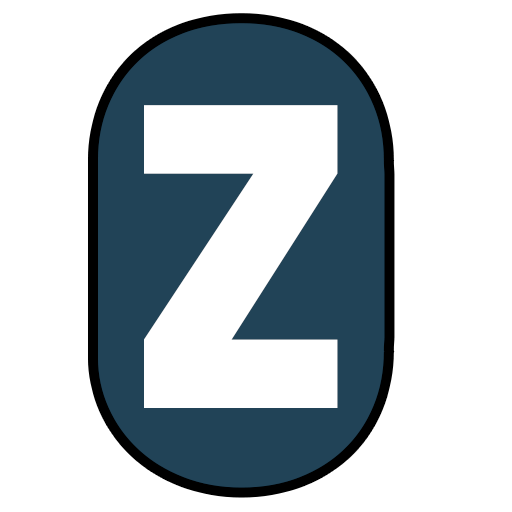
<style>
.page{position:relative;width:512px;height:512px;background:#ffffff}
.page>*{position:absolute;margin:0}
.t1{font:407px "Blackout-Sunrise";letter-spacing:-0.04em;color:#ffffff}
</style>
<div class="page">
<p class="t1" style="left:144px;top:105px;width:194px;height:303px">z</p>
</div>
